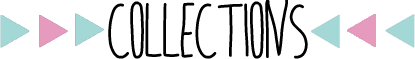
<style>
.page{position:relative;width:415px;height:59px;background:#ffffff}
.page>*{position:absolute;margin:0}
.t1{font:76.4px "Bite___Bullet";letter-spacing:-0.08em;color:#000000}
</style>
<div class="page">
<p class="t1" style="left:108px;top:0px;width:200px;height:59px">collections</p>
</div>
